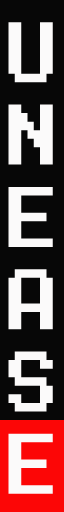
<style>
.page{position:relative;width:64px;height:512px;background:#070707}
.page>*{position:absolute;margin:0}
.t1{font:68.6px "MegaMan-2";color:#fbfafa;scale:0.74 1}
</style>
<div class="page">
<p class="t1" style="left:8px;top:22px;width:45px;height:472px;text-align:center">u<br>n<br>e<br>a<br>s<br>e</p>
</div>
